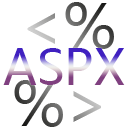
<style>
.page{position:relative;width:128px;height:128px;background:#ffffff}
.page>*{position:absolute;margin:0}
.t1{font:60px "MicrosoftYaHei"}
.t2{font:48px "MicrosoftYaHei"}
</style>
<div class="page">
<p class="t1" style="left:27px;top:2px;width:87px;height:47px">&lt;%</p>
<p class="t2" style="left:3px;top:48px;width:122px;height:37px">ASPX</p>
<p class="t1" style="left:14px;top:80px;width:87px;height:47px">%&gt;</p>
</div>
